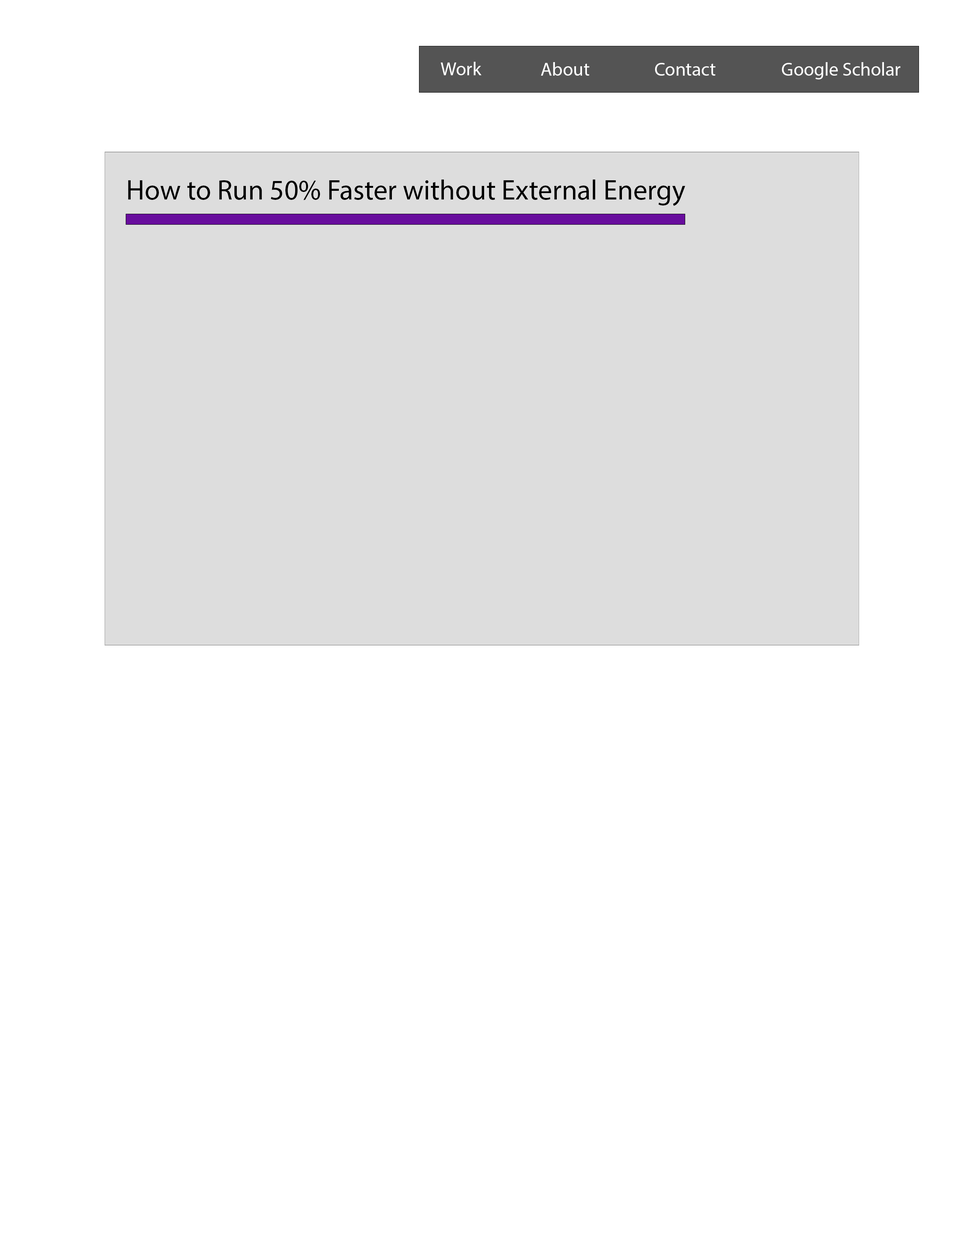
<style>
.page{position:relative;width:960px;height:1242px;background:#ffffff}
.page>*{position:absolute;margin:0}
.t1{font:18.8px "MyriadPro-Regular";color:#ffffff}
.t2{font:28.2px "MyriadPro-Regular";color:#000000}
</style>
<div class="page">
<p class="t1" style="left:440px;top:62px;width:41px;height:13px">Work</p>
<p class="t1" style="left:541px;top:62px;width:48px;height:14px">About</p>
<p class="t1" style="left:655px;top:63px;width:61px;height:13px">Contact</p>
<p class="t1" style="left:782px;top:62px;width:118px;height:17px">Google Scholar</p>
<p class="t2" style="left:128px;top:180px;width:557px;height:26px">How to Run 50% Faster without External Energy</p>
</div>
